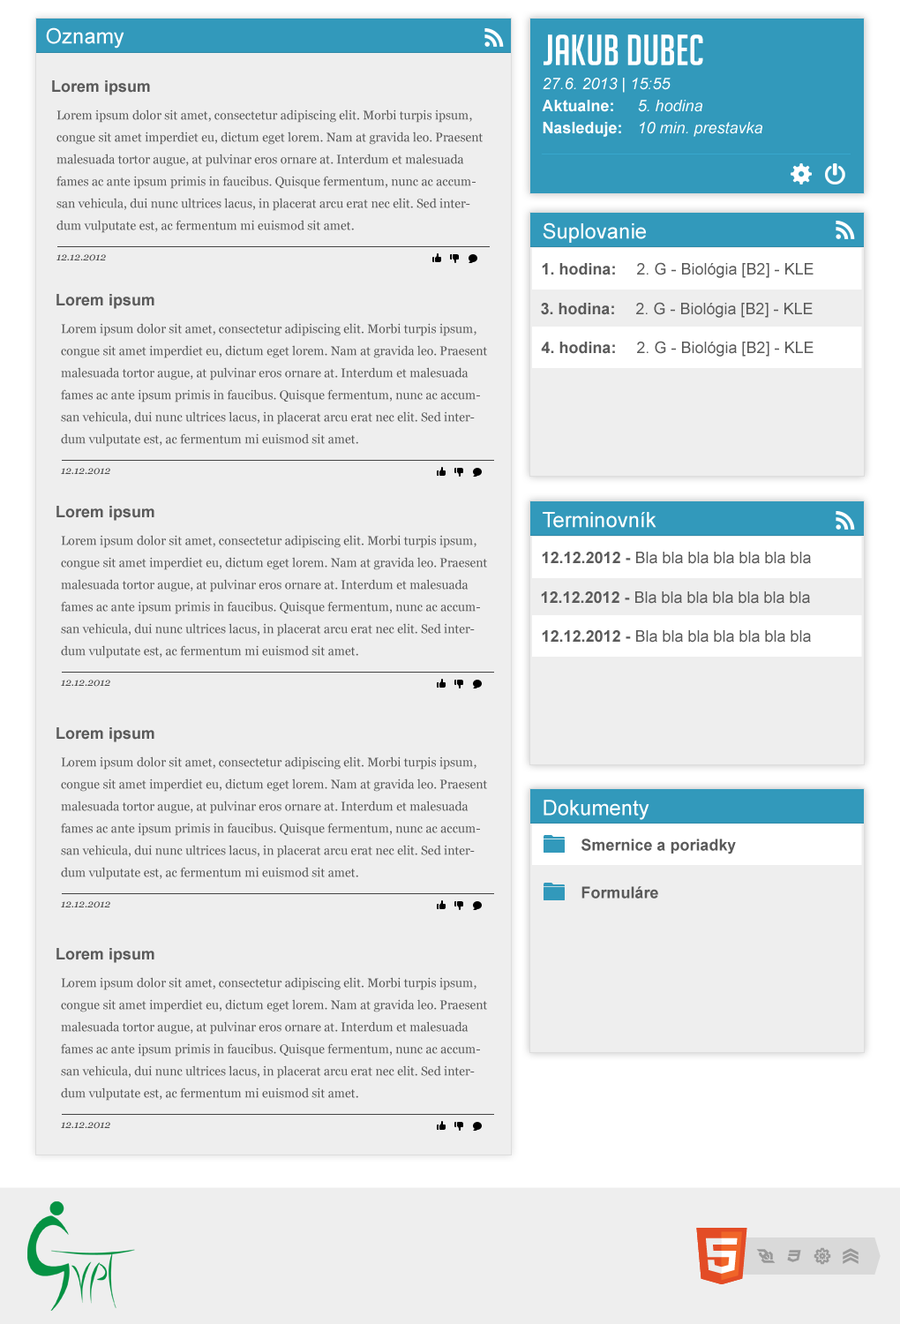
<style>
.page{position:relative;width:900px;height:1324px;background:#eeeeee}
.page>*{position:absolute;margin:0}
.t1{font:21.2px "ArialMT";color:#ffffff}
.t2{font:42.4px "BigNoodleTitling";color:#ffffff}
.t3{font:15.9px/22.1px "Arial-ItalicMT";color:#ffffff}
.t4{font:15.9px/22.1px "Arial-BoldMT";color:#ffffff}
.t5{font:15.9px "Arial-BoldMT";color:#5a5a5a}
.t6{font:12.4px/22.1px "Georgia";color:#5a5a5a}
.t7{font:10.6px "Georgia-Italic";color:#4b4b4b}
.t8{font:15.9px "ArialMT";color:#5a5a5a}
</style>
<div class="page">
<p class="t1" style="left:46px;top:27px;width:78px;height:22px">Oznamy</p>
<p class="t2" style="left:544px;top:34px;width:160px;height:31px">Jakub Dubec</p>
<p class="t3" style="left:542px;top:78px;width:221px;height:59px">27.6. 2013 | 15:55<br><span class="t4">Aktualne: </span>5. hodina<br><span class="t4">Nasleduje: </span>10 min. prestavka</p>
<p class="t5" style="left:52px;top:80px;width:98px;height:15px">Lorem ipsum</p>
<p class="t6" style="left:57px;top:109px;width:426px;height:124px">Lorem ipsum dolor sit amet, consectetur adipiscing elit. Morbi turpis ipsum, congue sit amet imperdiet eu, dictum eget lorem. Nam at gravida leo. Praesent malesuada tortor augue, at pulvinar eros ornare at. Interdum et malesuada fames ac ante ipsum primis in faucibus. Quisque fermentum, nunc ac accumsan vehicula, dui nunc ultrices lacus, in placerat arcu erat nec elit. Sed interdum vulputate est, ac fermentum mi euismod sit amet.</p>
<p class="t1" style="left:543px;top:222px;width:103px;height:21px">Suplovanie</p>
<p class="t7" style="left:57px;top:254px;width:49px;height:7px">12.12.2012</p>
<p class="t8" style="left:542px;top:262px;width:272px;height:16px"><span class="t5">1. hodina: </span>2. G - Biológia [B2] - KLE</p>
<p class="t5" style="left:57px;top:294px;width:97px;height:15px">Lorem ipsum</p>
<p class="t8" style="left:541px;top:302px;width:272px;height:16px"><span class="t5">3. hodina: </span>2. G - Biológia [B2] - KLE</p>
<p class="t6" style="left:61px;top:323px;width:426px;height:124px">Lorem ipsum dolor sit amet, consectetur adipiscing elit. Morbi turpis ipsum, congue sit amet imperdiet eu, dictum eget lorem. Nam at gravida leo. Praesent malesuada tortor augue, at pulvinar eros ornare at. Interdum et malesuada fames ac ante ipsum primis in faucibus. Quisque fermentum, nunc ac accumsan vehicula, dui nunc ultrices lacus, in placerat arcu erat nec elit. Sed interdum vulputate est, ac fermentum mi euismod sit amet.</p>
<p class="t8" style="left:541px;top:341px;width:273px;height:16px"><span class="t5">4. hodina: </span>2. G - Biológia [B2] - KLE</p>
<p class="t7" style="left:61px;top:468px;width:49px;height:7px">12.12.2012</p>
<p class="t5" style="left:57px;top:506px;width:97px;height:15px">Lorem ipsum</p>
<p class="t1" style="left:543px;top:512px;width:114px;height:16px">Terminovník</p>
<p class="t6" style="left:61px;top:535px;width:426px;height:124px">Lorem ipsum dolor sit amet, consectetur adipiscing elit. Morbi turpis ipsum, congue sit amet imperdiet eu, dictum eget lorem. Nam at gravida leo. Praesent malesuada tortor augue, at pulvinar eros ornare at. Interdum et malesuada fames ac ante ipsum primis in faucibus. Quisque fermentum, nunc ac accumsan vehicula, dui nunc ultrices lacus, in placerat arcu erat nec elit. Sed interdum vulputate est, ac fermentum mi euismod sit amet.</p>
<p class="t8" style="left:542px;top:552px;width:269px;height:12px"><span class="t5">12.12.2012 - </span>Bla bla bla bla bla bla bla</p>
<p class="t8" style="left:541px;top:591px;width:269px;height:13px"><span class="t5">12.12.2012 - </span>Bla bla bla bla bla bla bla</p>
<p class="t8" style="left:542px;top:630px;width:269px;height:13px"><span class="t5">12.12.2012 - </span>Bla bla bla bla bla bla bla</p>
<p class="t7" style="left:61px;top:680px;width:49px;height:7px">12.12.2012</p>
<p class="t5" style="left:57px;top:727px;width:97px;height:15px">Lorem ipsum</p>
<p class="t6" style="left:61px;top:757px;width:426px;height:123px">Lorem ipsum dolor sit amet, consectetur adipiscing elit. Morbi turpis ipsum, congue sit amet imperdiet eu, dictum eget lorem. Nam at gravida leo. Praesent malesuada tortor augue, at pulvinar eros ornare at. Interdum et malesuada fames ac ante ipsum primis in faucibus. Quisque fermentum, nunc ac accumsan vehicula, dui nunc ultrices lacus, in placerat arcu erat nec elit. Sed interdum vulputate est, ac fermentum mi euismod sit amet.</p>
<p class="t1" style="left:544px;top:800px;width:106px;height:20px">Dokumenty</p>
<p class="t5" style="left:582px;top:839px;width:154px;height:16px">Smernice a poriadky</p>
<p class="t5" style="left:582px;top:886px;width:77px;height:13px">Formuláre</p>
<p class="t7" style="left:61px;top:901px;width:49px;height:7px">12.12.2012</p>
<p class="t5" style="left:57px;top:948px;width:97px;height:15px">Lorem ipsum</p>
<p class="t6" style="left:61px;top:977px;width:426px;height:124px">Lorem ipsum dolor sit amet, consectetur adipiscing elit. Morbi turpis ipsum, congue sit amet imperdiet eu, dictum eget lorem. Nam at gravida leo. Praesent malesuada tortor augue, at pulvinar eros ornare at. Interdum et malesuada fames ac ante ipsum primis in faucibus. Quisque fermentum, nunc ac accumsan vehicula, dui nunc ultrices lacus, in placerat arcu erat nec elit. Sed interdum vulputate est, ac fermentum mi euismod sit amet.</p>
<p class="t7" style="left:61px;top:1122px;width:49px;height:7px">12.12.2012</p>
</div>
